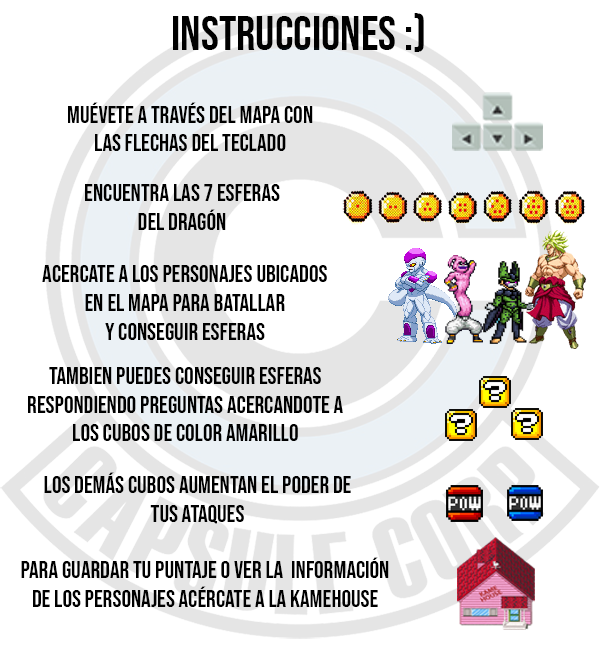
<style>
.page{position:relative;width:600px;height:650px;background:#ffffff}
.page>*{position:absolute;margin:0}
.t1{font:48px "BebasNeue-Regular";color:#000000}
.t2{font:24px "BebasNeue-Regular";color:#000000}
</style>
<div class="page">
<p class="t1" style="left:173px;top:13px;width:251px;height:39px">Instrucciones :)</p>
<p class="t2" style="left:68px;top:102px;width:245px;height:49px;text-align:center">Muévete a través del mapa con<br>las flechas del teclado</p>
<p class="t2" style="left:85px;top:184px;width:195px;height:46px;text-align:center">encuentra las 7 esferas<br>del dragón</p>
<p class="t2" style="left:42px;top:265px;width:285px;height:75px;text-align:center">Acercate a los personajes ubicados<br>en el mapa para batallar<br>y conseguir esferas</p>
<p class="t2" style="left:28px;top:367px;width:315px;height:74px;text-align:center">tambien puedes conseguir esferas respondiendo preguntas acercandote a los cubos de color amarillo</p>
<p class="t2" style="left:44px;top:472px;width:307px;height:52px;text-align:center">los demás cubos aumentan el poder de tus ataques</p>
<p class="t2" style="left:21px;top:557px;width:368px;height:50px;text-align:center">para guardar tu puntaje o ver la  información de los personajes acércate a la kamehouse</p>
</div>
